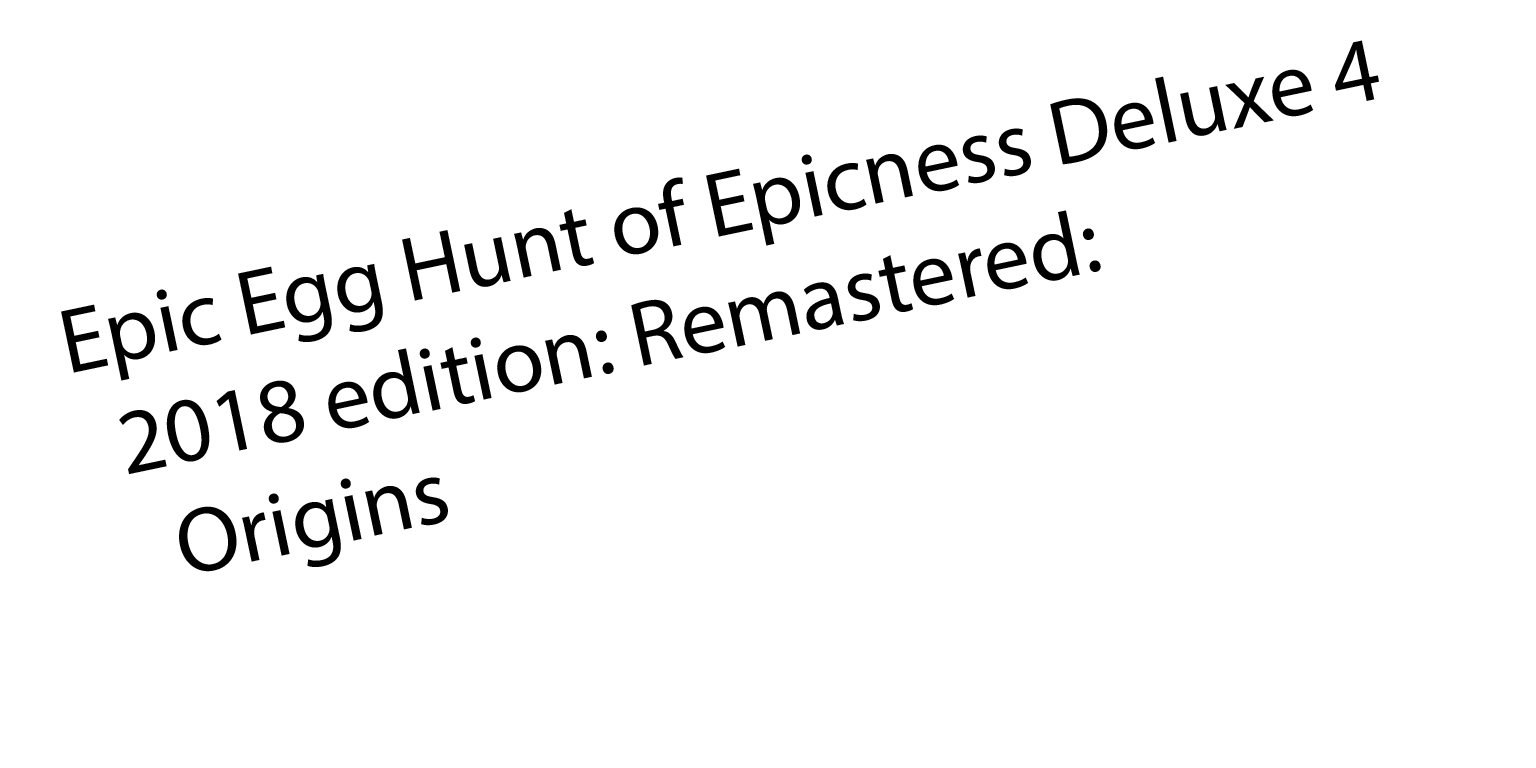
<style>
.page{position:relative;width:1536px;height:768px;background:#ffffff}
.page>*{position:absolute;margin:0}
.t1{font:92.5px "MyriadPro-Regular";color:#000000}
</style>
<div class="page">
<p class="t1" style="left:61px;top:40px;width:1318px;height:532px;rotate:-12deg">Epic Egg Hunt of Epicness Deluxe 4<br> 2018 edition: Remastered:<br>  Origins</p>
</div>
